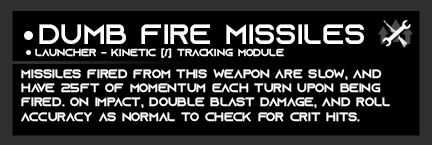
<style>
.page{position:relative;width:432px;height:145px;background:#000000}
.page>*{position:absolute;margin:0}
.t1{font:28px "AzonixRegular";color:#ffffff}
.t2{font:10px "AzonixRegular";color:#ffffff}
.t3{font:12px "AzonixRegular";color:#ffffff}
</style>
<div class="page">
<p class="t1" style="left:39px;top:24px;width:325px;height:20px">dumb fire missiles</p>
<p class="t2" style="left:35px;top:48px;width:249px;height:10px">launcher - kinetic [/] tracking module</p>
<p class="t3" style="left:21px;top:69px;width:369px;height:53px">missiles fired from this weapon are slow, and<br>have 25ft of momentum each turn upon being <br>fired. on impact, double blast damage, and roll <br>accuracy as normal to check for crit hits.</p>
</div>
